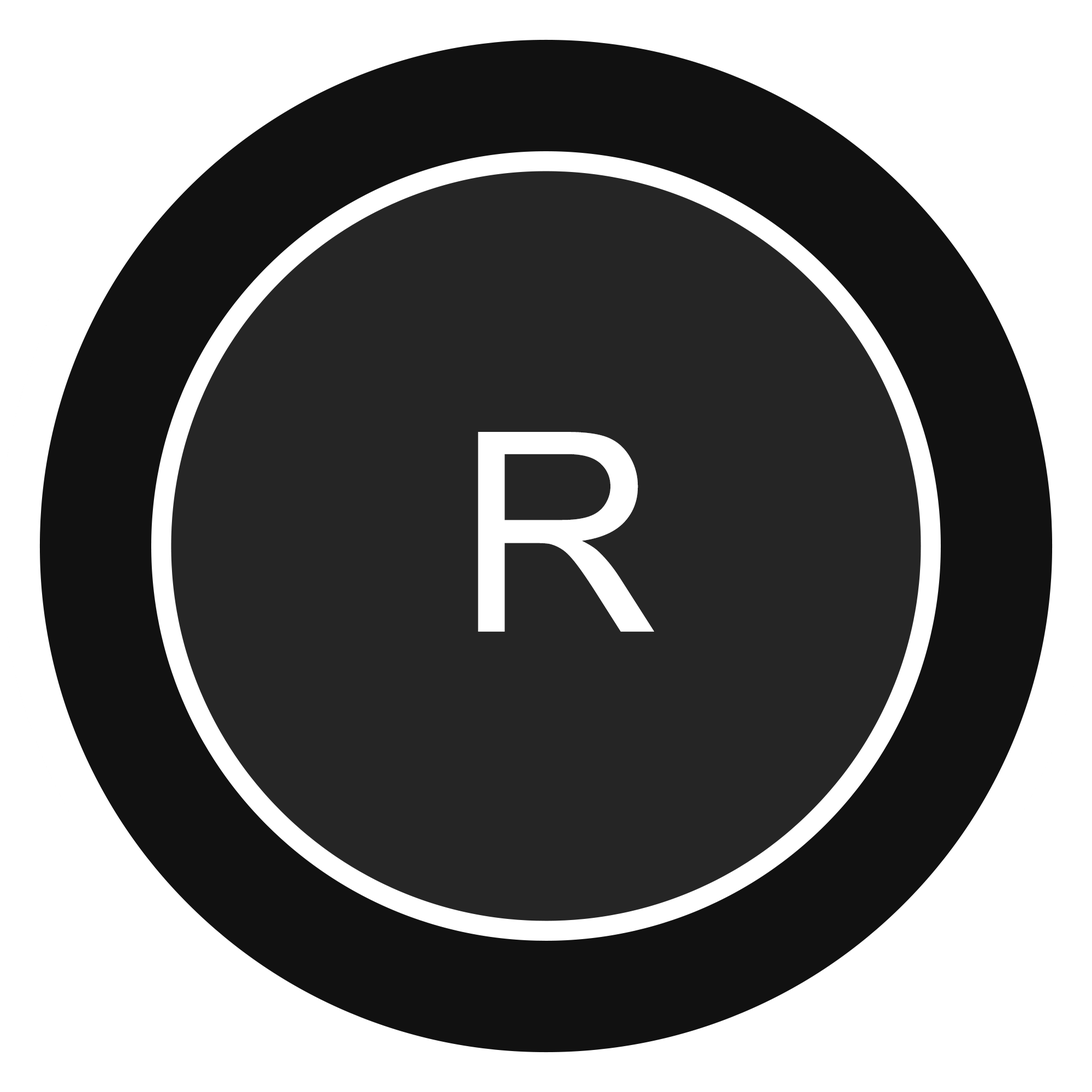
<style>
.page{position:relative;width:1092px;height:1092px;background:#ffffff}
.page>*{position:absolute;margin:0}
.t1{font:278.8px "ArialMT";color:#ffffff}
</style>
<div class="page">
<p class="t1" style="left:478px;top:432px;width:176px;height:200px">R</p>
</div>
